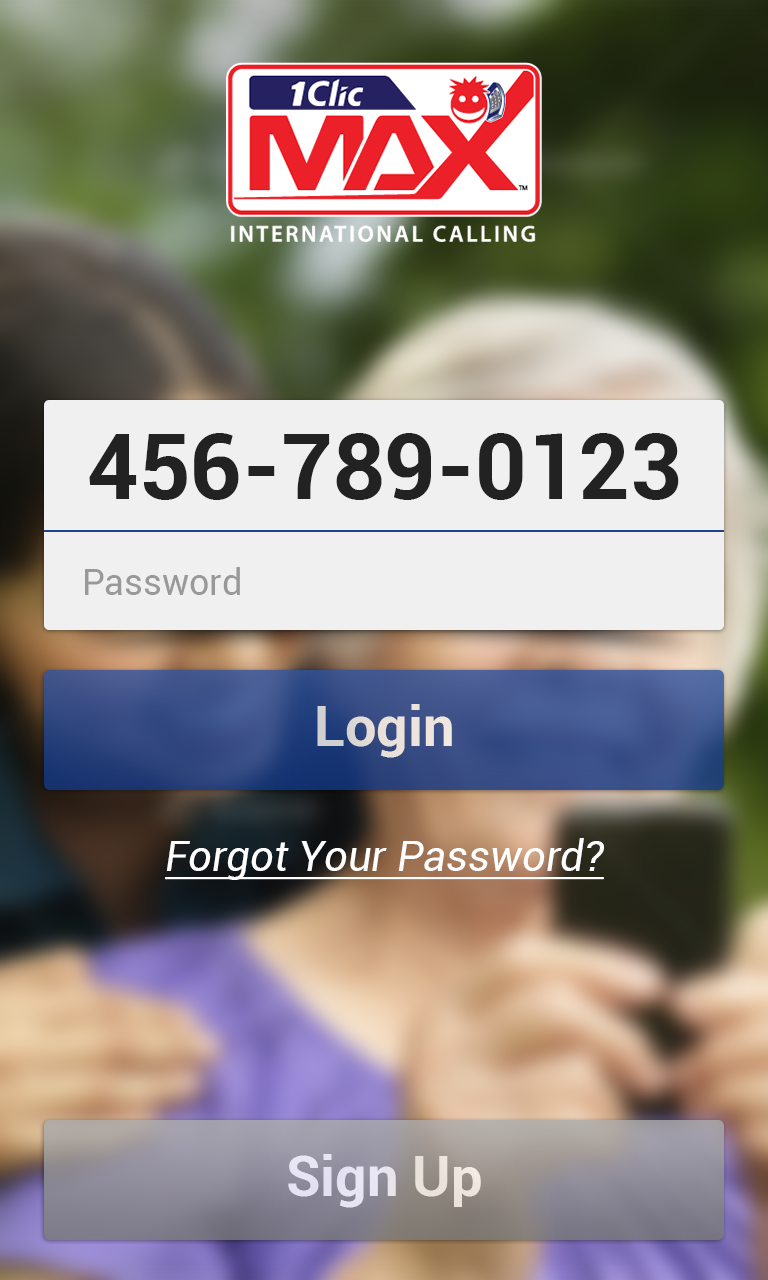
<style>
.page{position:relative;width:768px;height:1280px}
.page>*{position:absolute;margin:0}
.t1{font:90px "Roboto-Bold";color:#222222}
.t2{font:36px "Roboto-Regular";color:#999999}
.t3{font:56px "Roboto-Bold";color:#e9e0da}
.t4{font:42px "Roboto-Italic";color:#ffffff;text-decoration:underline}
.t5{font:56px "Roboto-Bold";color:#e8e4f1}
</style>
<div class="page">
<p class="t1" style="left:89px;top:433px;width:590px;height:67px">456-789-0123</p>
<p class="t2" style="left:85px;top:567px;width:155px;height:28px">Password</p>
<p class="t3" style="left:317px;top:704px;width:135px;height:54px">Login</p>
<p class="t4" style="left:165px;top:838px;width:439px;height:42px">Forgot Your Password?</p>
<p class="t5" style="left:288px;top:1154px;width:193px;height:54px">Sign Up</p>
</div>
